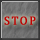
<style>
.page{position:relative;width:40px;height:40px}
.page>*{position:absolute;margin:0}
.t1{font:12px "Cambria";letter-spacing:0.1em;color:#bd0101;font-variant:small-caps;font-weight:bold}
</style>
<div class="page">
<p class="t1" style="left:4px;top:16px;width:32px;height:9px">STOP</p>
</div>
